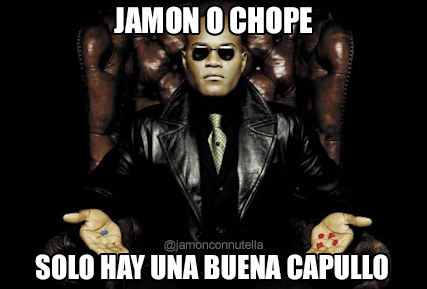
<style>
.page{position:relative;width:427px;height:289px;background:#000000}
.page>*{position:absolute;margin:0}
.t1{font:32.5px "Impact";color:#ffffff}
.t2{font:12px "ArialMT";color:#696969}
.t3{font:30.2px "Impact";color:#ffffff}
</style>
<div class="page">
<p class="t1" style="left:114px;top:6px;width:198px;height:28px">JAMON O CHOPE</p>
<p class="t2" style="left:164px;top:240px;width:99px;height:12px">@jamonconnutella</p>
<p class="t3" style="left:35px;top:254px;width:353px;height:26px">SOLO HAY UNA BUENA CAPULLO</p>
</div>
